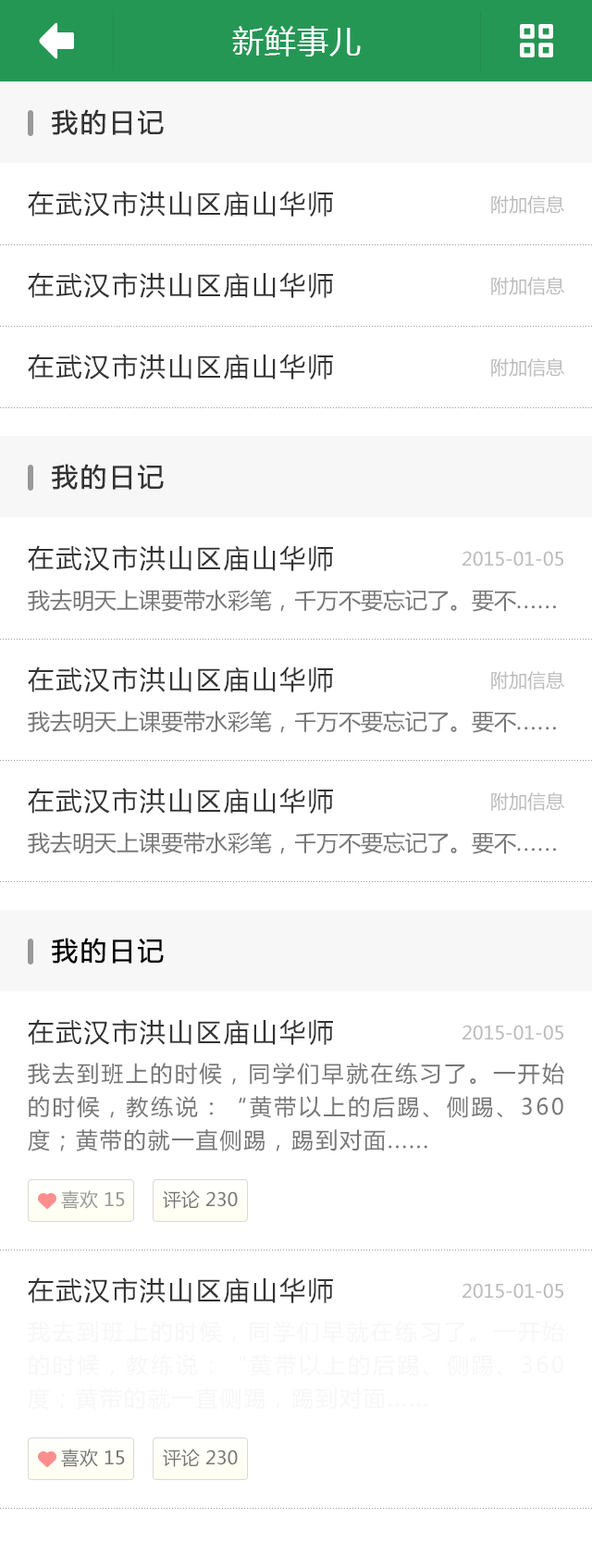
<style>
.page{position:relative;width:592px;height:1568px;background:#ffffff}
.page>*{position:absolute;margin:0}
.t1{font:25.9px "MicrosoftYaHei";letter-spacing:0.08em;color:#333333;font-weight:bold}
.t2{font:25.9px "MicrosoftYaHei";letter-spacing:0.08em;color:#333333}
.t3{font:18.5px "MicrosoftYaHei";color:#bbbbbb}
.t4{font:22.2px "MicrosoftYaHei";color:#777777}
.t5{font:22.2px "MicrosoftYaHei";letter-spacing:0.08em;color:#777777}
.t6{font:25.9px "MicrosoftYaHei";letter-spacing:0.08em;color:#000000;font-weight:bold}
.t7{font:22.2px/33.3px "MicrosoftYaHei";letter-spacing:0.08em;color:#777777}
.t8{font:18.5px "MicrosoftYaHei";color:#999999}
.t9{font:18.5px "MicrosoftYaHei";color:#777777}
.t10{font:22.2px/33.3px "MicrosoftYaHei";letter-spacing:0.08em;color:#f7f7f7}
</style>
<div class="page">
<p class="t1" style="left:52px;top:109px;width:112px;height:26px">我的日记</p>
<p class="t2" style="left:28px;top:191px;width:305px;height:26px">在武汉市洪山区庙山华师</p>
<p class="t3" style="left:492px;top:195px;width:73px;height:19px">附加信息</p>
<p class="t2" style="left:28px;top:272px;width:305px;height:26px">在武汉市洪山区庙山华师</p>
<p class="t3" style="left:492px;top:277px;width:73px;height:18px">附加信息</p>
<p class="t2" style="left:28px;top:354px;width:305px;height:26px">在武汉市洪山区庙山华师</p>
<p class="t3" style="left:492px;top:358px;width:73px;height:19px">附加信息</p>
<p class="t1" style="left:52px;top:464px;width:112px;height:26px">我的日记</p>
<p class="t2" style="left:28px;top:545px;width:305px;height:26px">在武汉市洪山区庙山华师</p>
<p class="t3" style="left:463px;top:551px;width:101px;height:15px">2015-01-05</p>
<p class="t4" style="left:28px;top:589px;width:528px;height:23px">我去明天上课要带水彩笔，千万不要忘记了。要不<span class="t5">......</span></p>
<p class="t2" style="left:28px;top:666px;width:305px;height:26px">在武汉市洪山区庙山华师</p>
<p class="t3" style="left:492px;top:671px;width:73px;height:19px">附加信息</p>
<p class="t4" style="left:28px;top:710px;width:528px;height:23px">我去明天上课要带水彩笔，千万不要忘记了。要不<span class="t5">......</span></p>
<p class="t2" style="left:28px;top:788px;width:305px;height:26px">在武汉市洪山区庙山华师</p>
<p class="t3" style="left:492px;top:792px;width:73px;height:19px">附加信息</p>
<p class="t4" style="left:28px;top:831px;width:528px;height:23px">我去明天上课要带水彩笔，千万不要忘记了。要不<span class="t5">......</span></p>
<p class="t6" style="left:52px;top:938px;width:112px;height:26px">我的日记</p>
<p class="t2" style="left:28px;top:1019px;width:305px;height:26px">在武汉市洪山区庙山华师</p>
<p class="t3" style="left:463px;top:1025px;width:101px;height:15px">2015-01-05</p>
<p class="t7" style="left:28px;top:1063px;width:537px;height:88px;text-align:justify">我去到班上的时候，同学们早就在练习了。一开始的时候，教练说：“黄带以上的后踢、侧踢、360度；黄带的就一直侧踢，踢到对面......</p>
<p class="t8" style="left:61px;top:1190px;width:64px;height:19px">喜欢 15</p>
<p class="t9" style="left:163px;top:1190px;width:75px;height:19px">评论 230</p>
<p class="t2" style="left:28px;top:1277px;width:305px;height:26px">在武汉市洪山区庙山华师</p>
<p class="t3" style="left:463px;top:1283px;width:101px;height:16px">2015-01-05</p>
<p class="t10" style="left:28px;top:1321px;width:537px;height:89px;text-align:justify">我去到班上的时候，同学们早就在练习了。一开始的时候，教练说：“黄带以上的后踢、侧踢、360度；黄带的就一直侧踢，踢到对面......</p>
<p class="t9" style="left:61px;top:1449px;width:64px;height:18px">喜欢 15</p>
<p class="t9" style="left:163px;top:1449px;width:75px;height:18px">评论 230</p>
</div>
